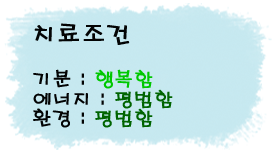
<style>
.page{position:relative;width:280px;height:150px}
.page>*{position:absolute;margin:0}
.t1{font:19.4px "H2porM";color:#030404;font-weight:bold}
.t2{font:24px "H2porM";color:#030404;font-weight:bold}
.t3{font:19.4px "H2porM";color:#00c800;font-weight:bold}
.t4{font:19.4px "H2porM";color:#006400;font-weight:bold}
</style>
<div class="page">
<p class="t1" style="left:33px;top:23px;width:140px;height:105px"><span class="t2">치료조건<br><br></span>기분 : <span class="t3">행복함<br></span>에너지 : <span class="t4">평범함<br></span>환경 : <span class="t4">평범함</span></p>
</div>
